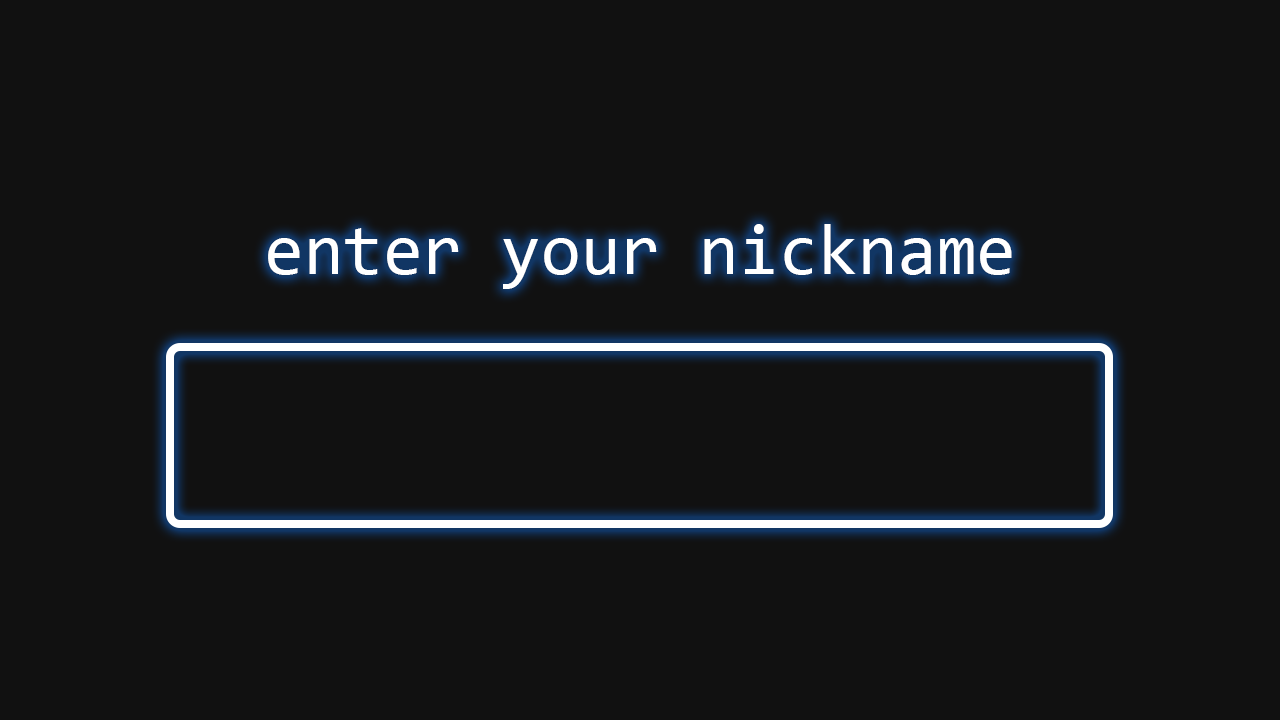
<style>
.page{position:relative;width:1280px;height:720px;background:#111111}
.page>*{position:absolute;margin:0}
.t1{font:72px "Consolas";color:#ffffff}
</style>
<div class="page">
<p class="t1" style="left:268px;top:224px;width:744px;height:65px">enter your nickname</p>
</div>
